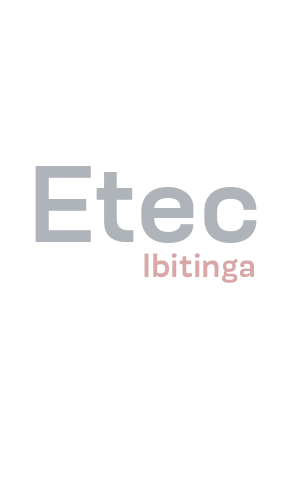
<style>
.page{position:relative;width:300px;height:500px;background:#ffffff}
.page>*{position:absolute;margin:0}
.t1{font:107.1px "NeusaNextPro-WideMedium";color:#aeb4ba}
.t2{font:38.8px "Modernica-Bold";color:#daa7a7}
</style>
<div class="page">
<p class="t1" style="left:35px;top:166px;width:222px;height:77px">Etec</p>
<p class="t2" style="left:144px;top:253px;width:110px;height:30px">Ibitinga</p>
</div>
